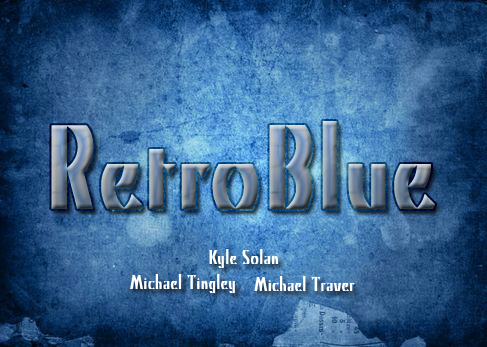
<style>
.page{position:relative;width:487px;height:347px}
.page>*{position:absolute;margin:0}
.t1{font:120px "KinoMT"}
.t2{font:20px "KinoMT";color:#ffffff}
</style>
<div class="page">
<p class="t1" style="left:51px;top:121px;width:384px;height:89px">RetroBlue</p>
<p class="t2" style="left:209px;top:249px;width:70px;height:19px">Kyle Solan</p>
<p class="t2" style="left:130px;top:274px;width:105px;height:19px">Michael Tingley</p>
<p class="t2" style="left:254px;top:276px;width:101px;height:15px">Michael Traver</p>
</div>
